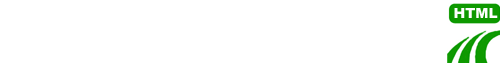
<style>
.page{position:relative;width:500px;height:63px;background:#ffffff}
.page>*{position:absolute;margin:0}
.t1{font:14px "Arial-Black";color:#ffffff}
</style>
<div class="page">
<p class="t1" style="left:454px;top:8px;width:44px;height:10px">HTML</p>
</div>
